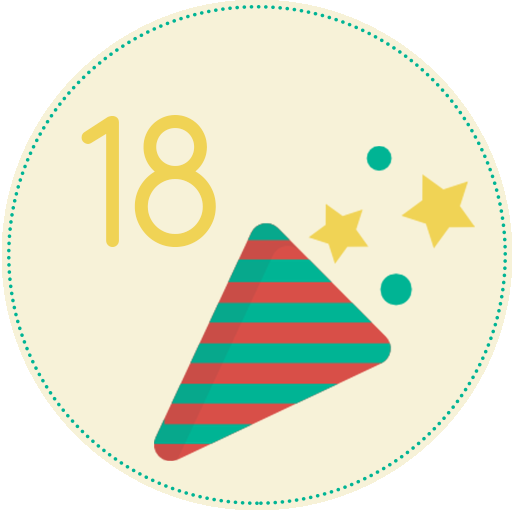
<style>
.page{position:relative;width:512px;height:512px;background:#f7f2d8}
.page>*{position:absolute;margin:0}
.t1{font:206.2px "Antipasto";color:#f0d355}
</style>
<div class="page">
<p class="t1" style="left:81px;top:115px;width:135px;height:132px">18</p>
</div>
